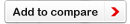
<style>
.page{position:relative;width:130px;height:24px}
.page>*{position:absolute;margin:0}
.t1{font:11px "ArialRoundedMTBold";color:#141414}
</style>
<div class="page">
<p class="t1" style="left:13px;top:7px;width:85px;height:11px">Add to compare</p>
</div>
